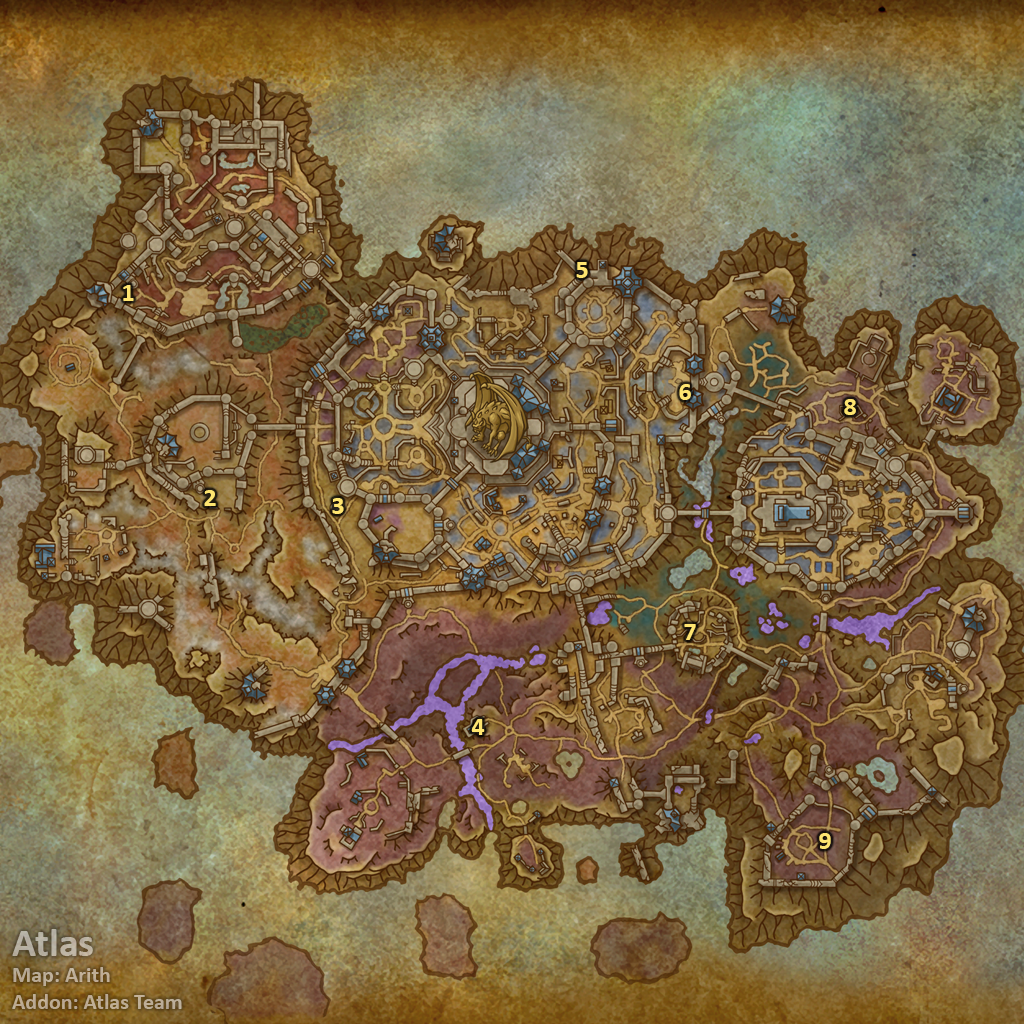
<style>
.page{position:relative;width:1024px;height:1024px}
.page>*{position:absolute;margin:0}
.t1{font:26px "Calibri-Bold";color:#fee570}
.t2{font:22px "Calibri-Bold";color:#bbad99}
.t3{font:40px "Calibri-Bold";color:#bbad99}
</style>
<div class="page">
<p class="t1" style="left:576px;top:262px;width:12px;height:16px">5</p>
<p class="t1" style="left:123px;top:285px;width:11px;height:16px">1</p>
<p class="t1" style="left:679px;top:384px;width:12px;height:16px">6</p>
<p class="t1" style="left:844px;top:399px;width:12px;height:16px">8</p>
<p class="t1" style="left:204px;top:490px;width:12px;height:16px">2</p>
<p class="t1" style="left:332px;top:498px;width:12px;height:16px">3</p>
<p class="t1" style="left:684px;top:624px;width:12px;height:16px">7</p>
<p class="t1" style="left:471px;top:719px;width:14px;height:16px">4</p>
<p class="t1" style="left:819px;top:833px;width:12px;height:16px">9</p>
<p class="t2" style="left:12px;top:929px;width:170px;height:80px"><span class="t3">Atlas<br></span>Map: Arith<br>Addon: Atlas Team</p>
</div>
